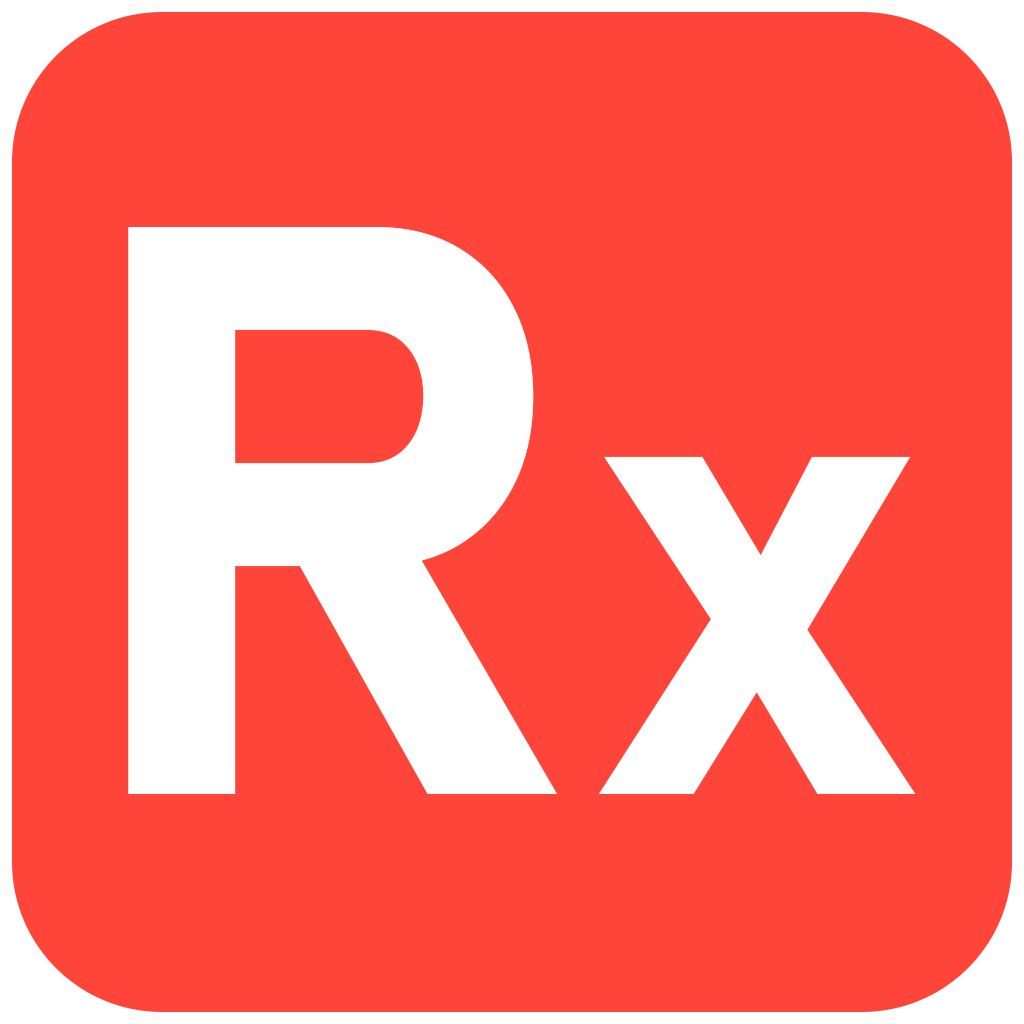
<style>
.page{position:relative;width:1024px;height:1024px;background:#ff4539}
.page>*{position:absolute;margin:0}
.t1{font:798px "Bahnschrift-Bold";color:#ffffff}
.t2{font:665px "Bahnschrift-Bold";color:#ffffff}
</style>
<div class="page">
<p class="t1" style="left:128px;top:227px;width:788px;height:567px">R<span class="t2">x</span></p>
</div>
